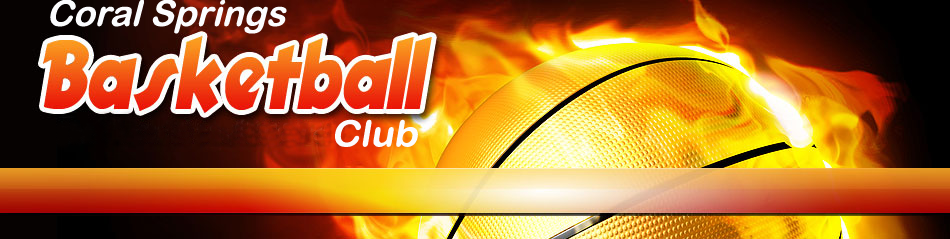
<style>
.page{position:relative;width:950px;height:239px}
.page>*{position:absolute;margin:0}
.t1{font:37.2px "ArialRoundedMTBold";color:#fbfcfe;scale:0.97 1}
.t2{font:37px "ArialRoundedMTBold";color:#fbfcfe;scale:1.04 1}
</style>
<div class="page">
<p class="t1" style="left:50px;top:0px;width:237px;height:34px">Coral Springs</p>
<p class="t2" style="left:335px;top:119px;width:83px;height:28px">Club</p>
</div>
